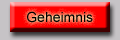
<style>
.page{position:relative;width:120px;height:40px}
.page>*{position:absolute;margin:0}
.t1{font:14px "ArialMT";color:#000000}
</style>
<div class="page">
<p class="t1" style="left:27px;top:11px;width:66px;height:12px">Geheimnis</p>
</div>
